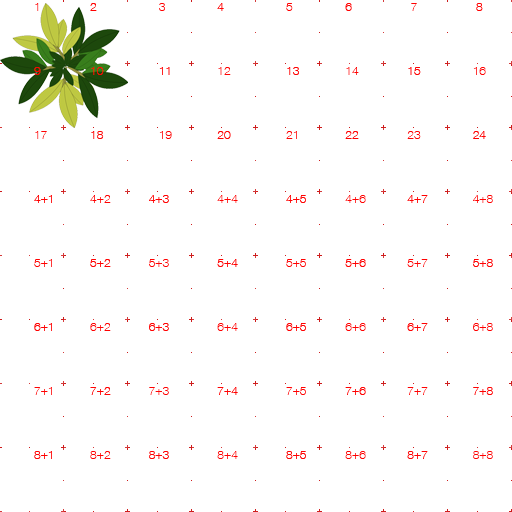
<style>
.page{position:relative;width:512px;height:512px;background:#ffffff}
.page>*{position:absolute;margin:0}
.t1{font:12px/64px "HelveticaNeue-Thin";color:#ff0101}
</style>
<div class="page">
<p class="t1" style="left:34px;top:3px;width:459px;height:456px">1       2       3   4  5        6       7     8<br>9       10       11   12  13        14     15    16<br>17       18       19   20  21        22     23    24<br>4+1       4+2   4+3   4+4  4+5        4+6     4+7    4+8<br>5+1       5+2   5+3   5+4  5+5        5+6     5+7    5+8<br>6+1       6+2   6+3   6+4  6+5        6+6     6+7    6+8<br>7+1       7+2   7+3   7+4  7+5        7+6     7+7    7+8<br>8+1       8+2   8+3   8+4  8+5        8+6     8+7    8+8</p>
</div>
